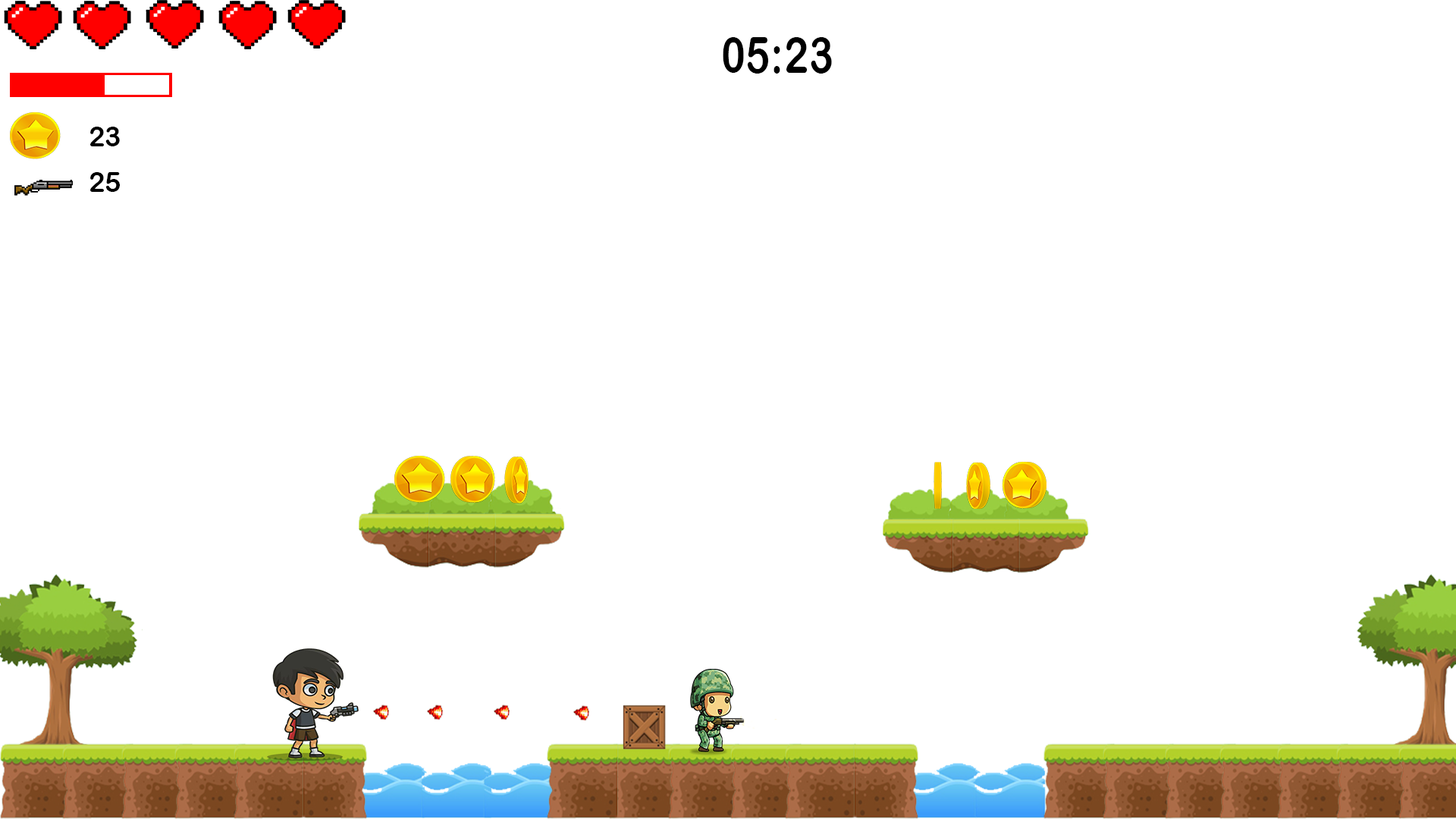
<style>
.page{position:relative;width:1456px;height:819px;background:#ffffff}
.page>*{position:absolute;margin:0}
.t1{font:49.9px "ArialRoundedMTBold";letter-spacing:0.01em;color:#000000;scale:0.83 1}
.t2{font:27.3px "ArialRoundedMTBold";letter-spacing:0.01em;color:#000000}
</style>
<div class="page">
<p class="t1" style="left:723px;top:37px;width:109px;height:37px">05:23</p>
<p class="t2" style="left:90px;top:127px;width:30px;height:19px">23</p>
<p class="t2" style="left:90px;top:172px;width:30px;height:20px">25</p>
</div>
